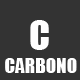
<style>
.page{position:relative;width:80px;height:80px;background:#333333}
.page>*{position:absolute;margin:0}
.t1{font:38.4px "Impact";color:#fffefe}
.t2{font:19.2px "Impact";color:#ffffff}
</style>
<div class="page">
<p class="t1" style="left:30px;top:20px;width:19px;height:30px">C</p>
<p class="t2" style="left:5px;top:58px;width:72px;height:15px">CARBONO</p>
</div>
